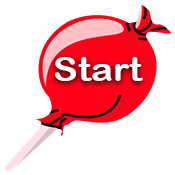
<style>
.page{position:relative;width:175px;height:175px;background:#ffffff}
.page>*{position:absolute;margin:0}
.t1{font:33px "ArialRoundedMTBold";color:#ffffff;scale:1.11 1}
</style>
<div class="page">
<p class="t1" style="left:55px;top:57px;width:88px;height:24px">Start</p>
</div>
